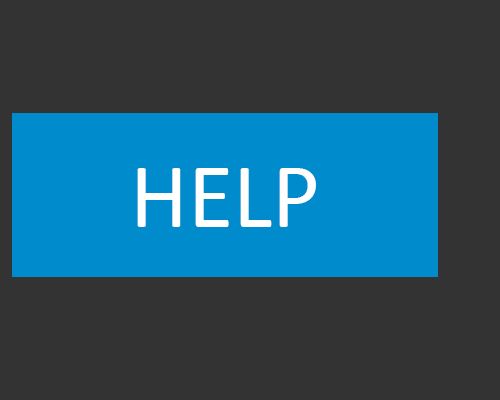
<style>
.page{position:relative;width:500px;height:400px;background:#333333}
.page>*{position:absolute;margin:0}
.t1{font:92.8px "Calibri";color:#ffffff}
</style>
<div class="page">
<p class="t1" style="left:137px;top:168px;width:179px;height:59px">HELP</p>
</div>
